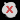
<style>
.page{position:relative;width:20px;height:20px;background:#d6d6d6}
.page>*{position:absolute;margin:0}
.t1{font:9px "MicrosoftSansSerif";color:#c74444;scale:1.18 1}
</style>
<div class="page">
<p class="t1" style="left:6px;top:6px;width:7px;height:7px">X</p>
</div>
